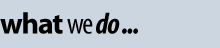
<style>
.page{position:relative;width:220px;height:48px;background:#ccd6e0}
.page>*{position:absolute;margin:0}
.t1{font:30px "Myriad-CnBoldItalic";letter-spacing:-0.04em;color:#000000}
.t2{font:30px "Myriad-Bold";letter-spacing:-0.04em;color:#000000}
.t3{font:30px "Myriad-Condensed";letter-spacing:-0.04em;color:#000000}
</style>
<div class="page">
<p class="t1" style="left:0px;top:12px;width:138px;height:22px"><span class="t2">what </span><span class="t3">we </span>do ...</p>
</div>
